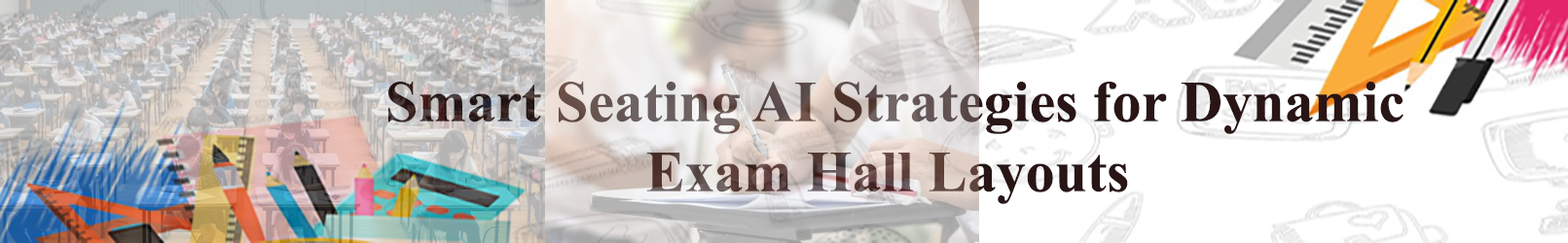
<style>
.page{position:relative;width:1568px;height:243px;background:#ffffff}
.page>*{position:absolute;margin:0}
.t1{font:58.4px "TimesNewRomanPS-BoldMT"}
</style>
<div class="page">
<p class="t1" style="left:388px;top:82px;width:1016px;height:122px;text-align:center">Smart Seating AI Strategies for Dynamic <br>Exam Hall Layouts</p>
</div>
